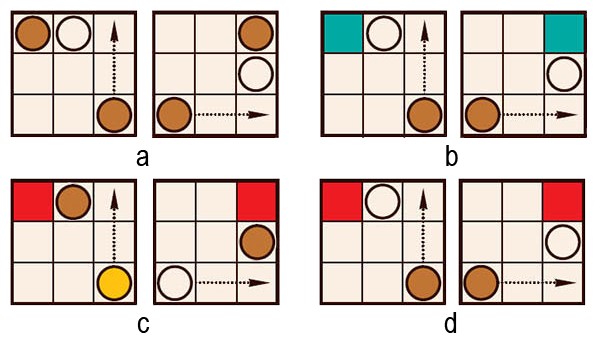
<style>
.page{position:relative;width:600px;height:344px;background:#ffffff}
.page>*{position:absolute;margin:0}
.t1{font:30px "ArialNarrow";color:#000000}
</style>
<div class="page">
<p class="t1" style="left:136px;top:150px;width:13px;height:16px">a</p>
<p class="t1" style="left:446px;top:145px;width:12px;height:21px">b</p>
<p class="t1" style="left:137px;top:317px;width:13px;height:16px">c</p>
<p class="t1" style="left:444px;top:312px;width:13px;height:21px">d</p>
</div>
